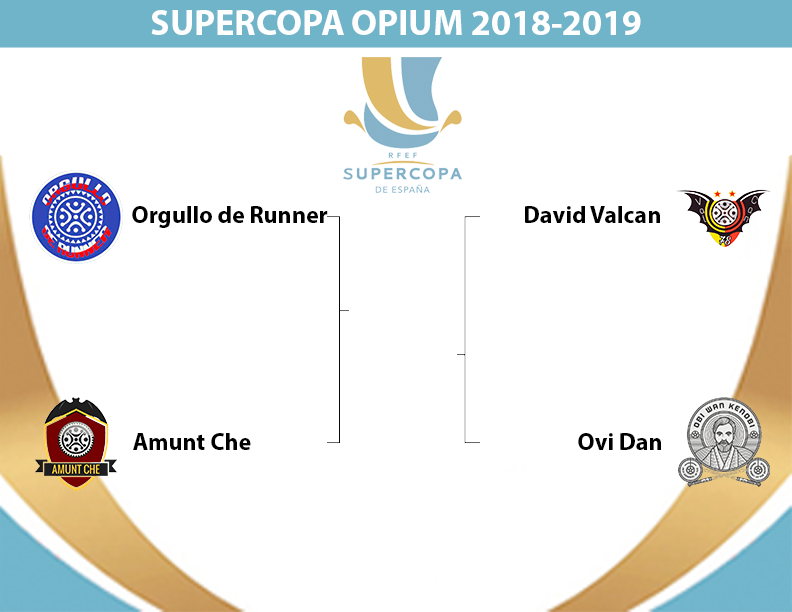
<style>
.page{position:relative;width:792px;height:612px;background:#ffffff}
.page>*{position:absolute;margin:0}
.t1{font:36px "MyriadPro-Bold";color:#fefefe}
.t2{font:24px "MyriadPro-Bold";color:#000000}
</style>
<div class="page">
<p class="t1" style="left:151px;top:10px;width:490px;height:25px">SUPERCOPA OPIUM 2018-2019</p>
<p class="t2" style="left:132px;top:206px;width:196px;height:22px">Orgullo de Runner</p>
<p class="t2" style="left:525px;top:206px;width:135px;height:17px">David Valcan</p>
<p class="t2" style="left:133px;top:433px;width:118px;height:17px">Amunt Che</p>
<p class="t2" style="left:578px;top:433px;width:83px;height:17px">Ovi Dan</p>
</div>
